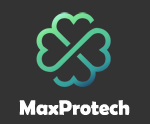
<style>
.page{position:relative;width:150px;height:124px;background:#333333}
.page>*{position:absolute;margin:0}
.t1{font:20.8px "BerlinSansFBDemi-Bold";color:#fefefe}
</style>
<div class="page">
<p class="t1" style="left:19px;top:100px;width:111px;height:15px">MaxProtech</p>
</div>
